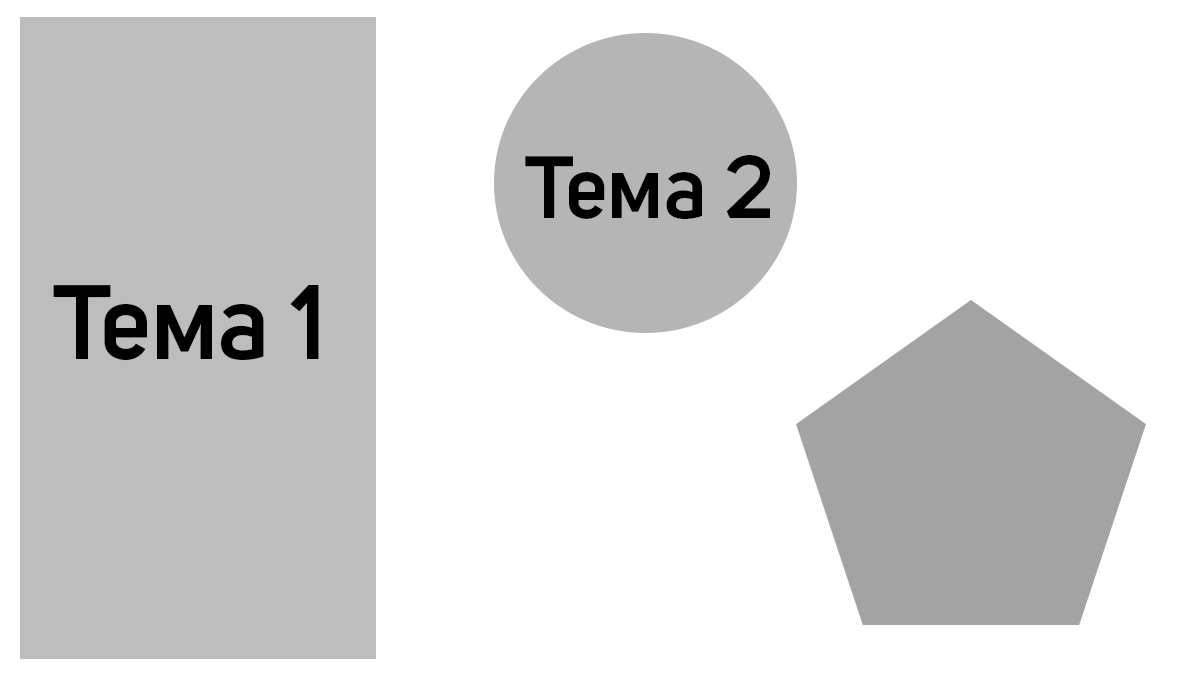
<style>
.page{position:relative;width:1200px;height:675px;background:#ffffff}
.page>*{position:absolute;margin:0}
.t1{font:87.5px "UniSans-Trial-SemiBold";color:#000000}
.t2{font:104.2px "UniSans-Trial-SemiBold";color:#000000}
</style>
<div class="page">
<p class="t1" style="left:525px;top:155px;width:245px;height:64px">Тема 2</p>
<p class="t2" style="left:53px;top:285px;width:266px;height:76px">Тема 1</p>
</div>
